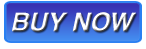
<style>
.page{position:relative;width:146px;height:49px;background:#ffffff}
.page>*{position:absolute;margin:0}
.t1{font:25.8px "Helvetica-BoldOblique";color:#ffffff}
</style>
<div class="page">
<p class="t1" style="left:12px;top:12px;width:124px;height:20px">BUY NOW</p>
</div>
